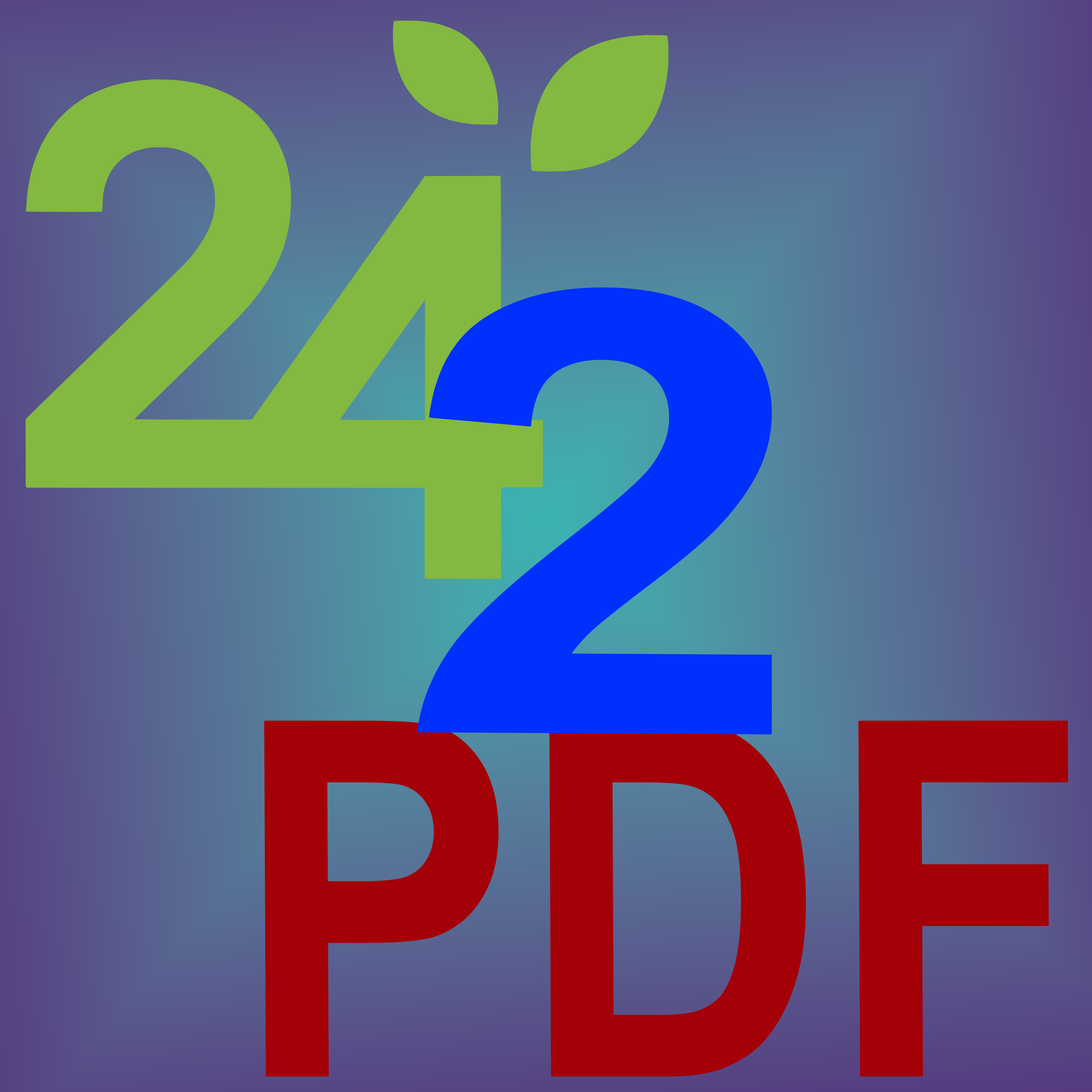
<style>
.page{position:relative;width:1092px;height:1092px}
.page>*{position:absolute;margin:0}
.t1{font:618.4px "Arial-BoldMT";letter-spacing:-0.02em;color:#0030fb;font-weight:bold;scale:1.19 1}
.t2{font:494.6px "Arial-BoldMT";letter-spacing:-0.02em;color:#a30008;font-weight:bold;scale:0.86 1}
</style>
<div class="page">
<p class="t1" style="left:417px;top:287px;width:355px;height:447px">2</p>
<p class="t2" style="left:264px;top:720px;width:804px;height:357px">PDF</p>
</div>
